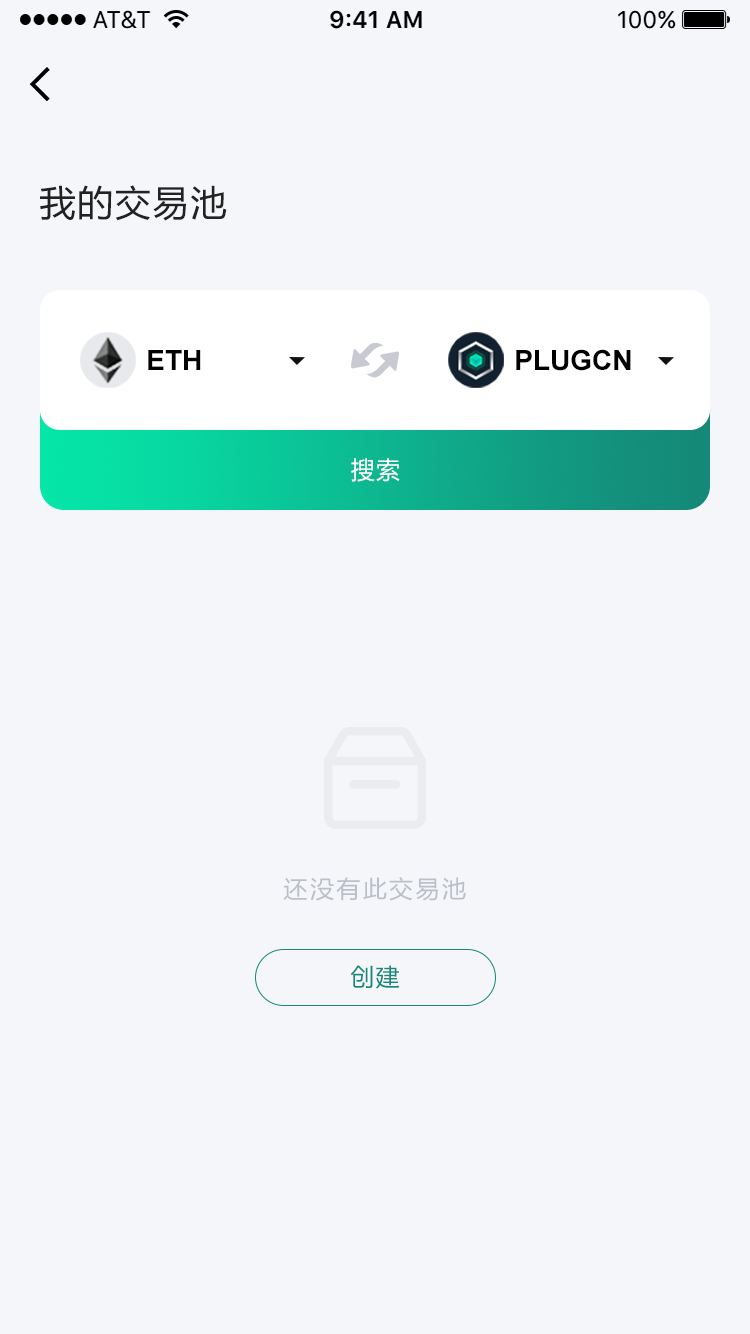
<style>
.page{position:relative;width:750px;height:1334px;background:#f5f6fa}
.page>*{position:absolute;margin:0}
.t1{font:36px "MicrosoftYaHei";letter-spacing:0.05em;color:#222222}
.t2{font:28px "Arial-BoldMT";color:#000000}
.t3{font:24px "MicrosoftYaHei";letter-spacing:0.05em;color:#ffffff}
.t4{font:24px "MicrosoftYaHei";letter-spacing:0.1em;color:#bbbfc8}
.t5{font:24px "MicrosoftYaHei";letter-spacing:0.05em;color:#158878}
</style>
<div class="page">
<p class="t1" style="left:40px;top:185px;width:187px;height:36px">我的交易池</p>
<p class="t2" style="left:148px;top:350px;width:53px;height:20px">ETH</p>
<p class="t2" style="left:516px;top:349px;width:115px;height:22px">PLUGCN</p>
<p class="t3" style="left:351px;top:458px;width:49px;height:24px">搜索</p>
<p class="t4" style="left:283px;top:877px;width:183px;height:24px">还没有此交易池</p>
<p class="t5" style="left:350px;top:965px;width:50px;height:24px">创建</p>
</div>
